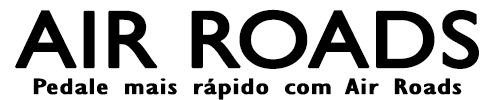
<style>
.page{position:relative;width:500px;height:100px;background:#ffffff}
.page>*{position:absolute;margin:0}
.t1{font:81px "GillSansMT";color:#000000;font-weight:bold;scale:1.1 1}
.t2{font:22.6px "GillSansMT-Condensed";color:#000000;font-weight:bold;scale:1.73 1}
</style>
<div class="page">
<p class="t1" style="left:15px;top:9px;width:464px;height:60px">AIR ROADS</p>
<p class="t2" style="left:33px;top:78px;width:429px;height:22px">Pedale mais rápido com Air Roads</p>
</div>
